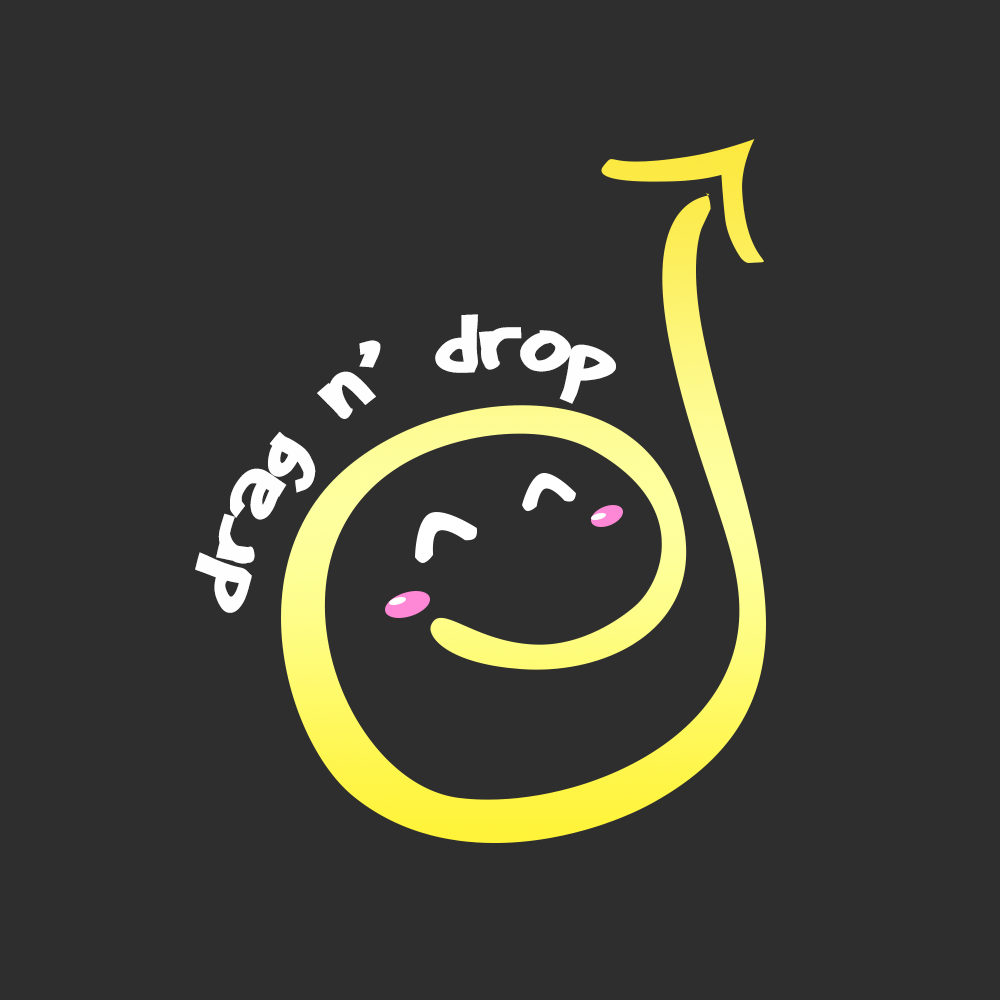
<style>
.page{position:relative;width:1000px;height:1000px;background:#2e2e2e}
.page>*{position:absolute;margin:0}
.t1{font:86.4px "Animated";color:#fefefe}
</style>
<div class="page">
<p class="t1" style="left:195px;top:314px;width:421px;height:299px;rotate:-31deg">drag n’ drop</p>
</div>
